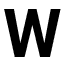
<style>
.page{position:relative;width:64px;height:64px;background:#ffffff}
.page>*{position:absolute;margin:0}
.t1{font:66.7px "Roboto-Bold";color:#000000}
</style>
<div class="page">
<p class="t1" style="left:4px;top:9px;width:57px;height:48px">W</p>
</div>
